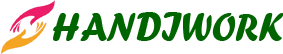
<style>
.page{position:relative;width:283px;height:54px;background:#ffffff}
.page>*{position:absolute;margin:0}
.t1{font:41.2px "ForteMT";color:#006400;scale:0.89 1}
</style>
<div class="page">
<p class="t1" style="left:53px;top:12px;width:230px;height:29px">HANDIWORK</p>
</div>
